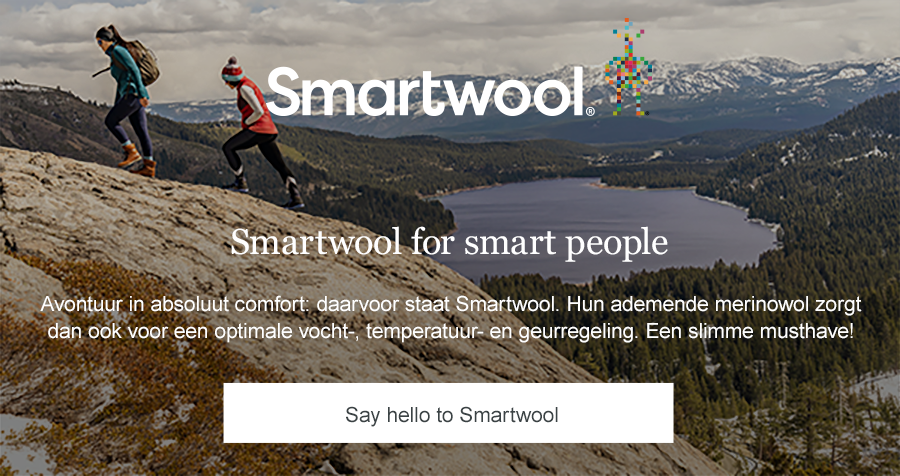
<style>
.page{position:relative;width:900px;height:476px}
.page>*{position:absolute;margin:0}
.t1{font:36px "Georgia";color:#ffffff}
.t2{font:21px/27px "ArialMT";color:#ffffff}
.t3{font:21px "ArialMT";color:#3b4345}
</style>
<div class="page">
<p class="t1" style="left:231px;top:226px;width:437px;height:36px">Smartwool for smart people</p>
<p class="t2" style="left:40px;top:295px;width:822px;height:48px;text-align:center">Avontuur in absoluut comfort: daarvoor staat Smartwool. Hun ademende merinowol zorgt dan ook voor een optimale vocht-, temperatuur- en geurregeling. Een slimme musthave!</p>
<p class="t3" style="left:346px;top:406px;width:212px;height:21px">Say hello to Smartwool</p>
</div>
